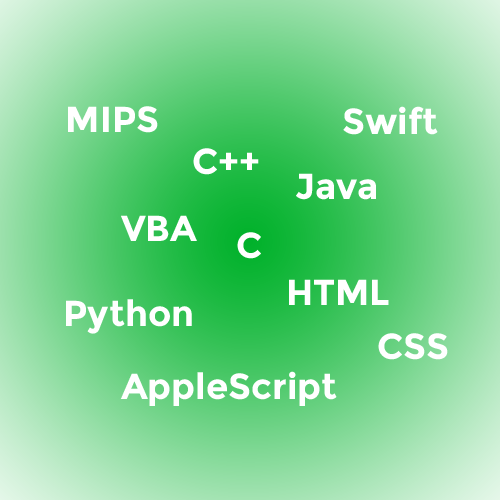
<style>
.page{position:relative;width:500px;height:500px}
.page>*{position:absolute;margin:0}
.t1{font:36px "Montserrat-Bold";color:#ffffff}
</style>
<div class="page">
<p class="t1" style="left:68px;top:106px;width:90px;height:27px">MIPS</p>
<p class="t1" style="left:343px;top:106px;width:95px;height:29px">Swift</p>
<p class="t1" style="left:193px;top:148px;width:66px;height:27px">C++</p>
<p class="t1" style="left:296px;top:173px;width:80px;height:27px">Java</p>
<p class="t1" style="left:121px;top:215px;width:76px;height:26px">VBA</p>
<p class="t1" style="left:237px;top:232px;width:24px;height:27px">C</p>
<p class="t1" style="left:289px;top:279px;width:100px;height:26px">HTML</p>
<p class="t1" style="left:66px;top:299px;width:126px;height:35px">Python</p>
<p class="t1" style="left:378px;top:333px;width:70px;height:27px">CSS</p>
<p class="t1" style="left:120px;top:371px;width:217px;height:35px">AppleScript</p>
</div>
